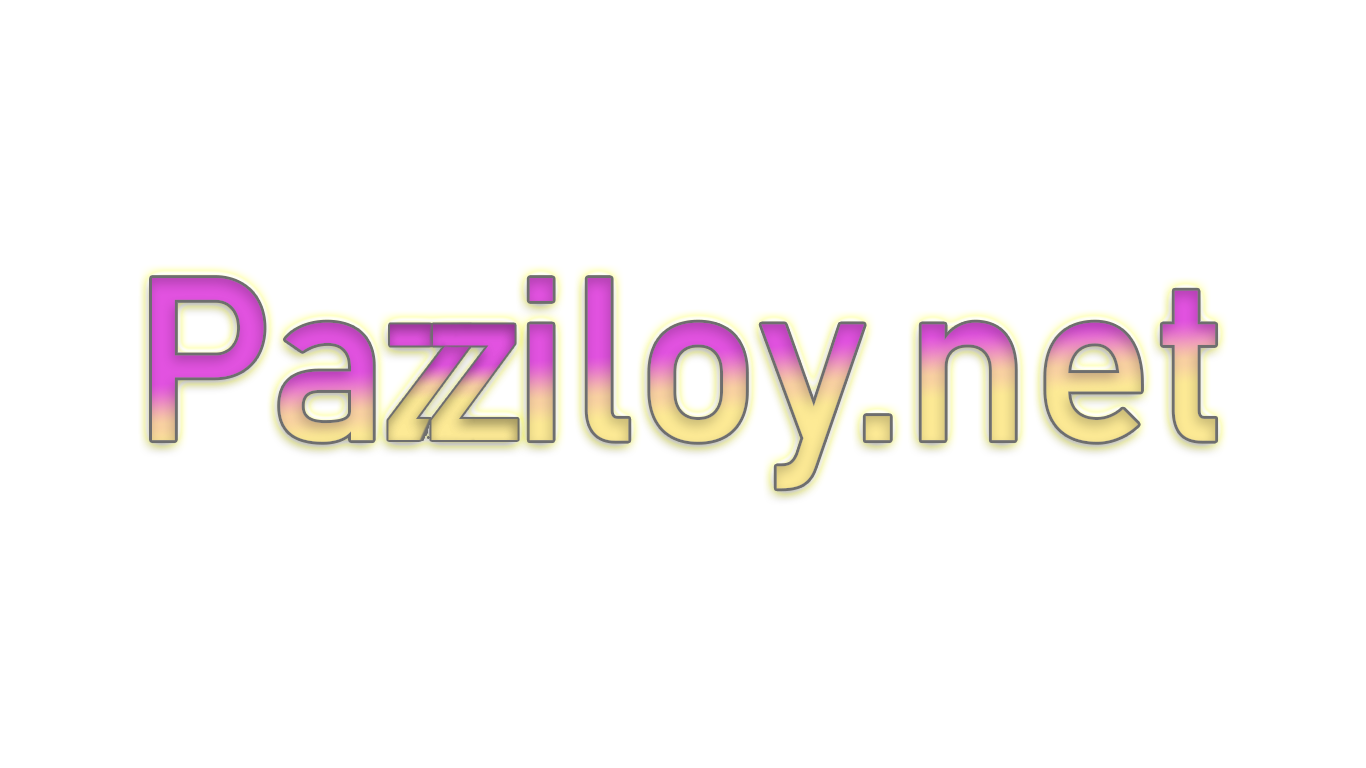
<style>
.page{position:relative;width:1366px;height:768px;background:#ffffff}
.page>*{position:absolute;margin:0}
.t1{font:227.9px "Bahnschrift"}
</style>
<div class="page">
<p class="t1" style="left:152px;top:278px;width:1064px;height:211px">Pa  iloy.net</p>
</div>
